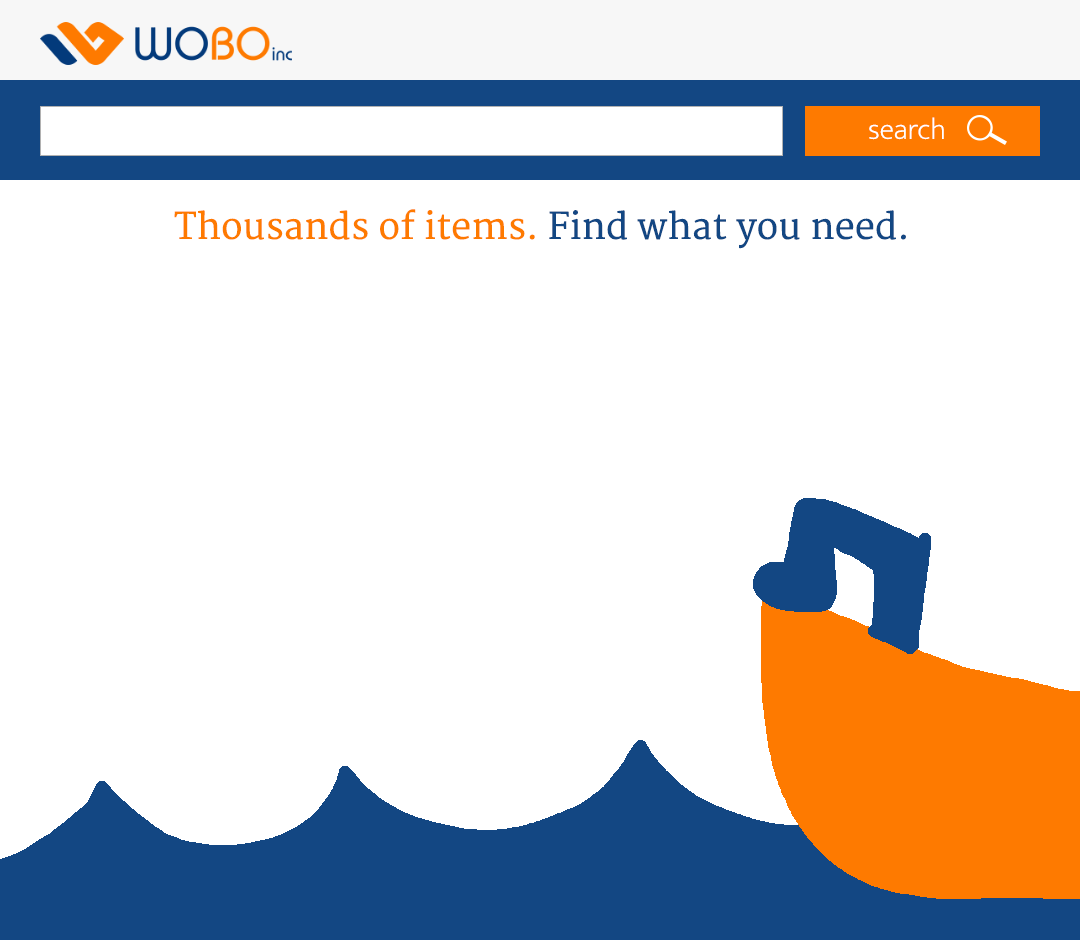
<style>
.page{position:relative;width:1080px;height:940px;background:#ffffff}
.page>*{position:absolute;margin:0}
.t1{font:30px "EkMukta-ExtraLight";color:#ffffff}
.t2{font:36px "Merriweather";color:#fe7a00}
.t3{font:36px "Merriweather";color:#134783}
</style>
<div class="page">
<p class="t1" style="left:869px;top:117px;width:75px;height:23px">search</p>
<p class="t2" style="left:174px;top:209px;width:732px;height:40px">Thousands of items. <span class="t3">Find what you need.</span></p>
</div>
